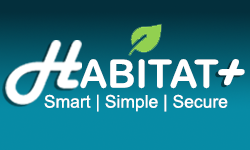
<style>
.page{position:relative;width:250px;height:150px;background:#078ba5}
.page>*{position:absolute;margin:0}
.t1{font:39px "ArialRoundedMTBold";color:#ffffff}
.t2{font:60px "HarlowSolid";color:#ffffff}
.t3{font:17.5px "ArialMT";color:#ffffff}
</style>
<div class="page">
<p class="t1" style="left:80px;top:59px;width:139px;height:30px">ABITAT</p>
<p class="t2" style="left:218px;top:59px;width:27px;height:27px">+</p>
<p class="t3" style="left:44px;top:94px;width:184px;height:18px">Smart | Simple | Secure</p>
</div>
